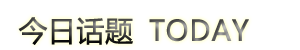
<style>
.page{position:relative;width:300px;height:50px;background:#ffffff}
.page>*{position:absolute;margin:0}
.t1{font:28px "MicrosoftYaHei";font-weight:bold}
</style>
<div class="page">
<p class="t1" style="left:18px;top:17px;width:115px;height:28px">今日话题</p>
<p class="t1" style="left:149px;top:19px;width:100px;height:23px">TODAY</p>
</div>
